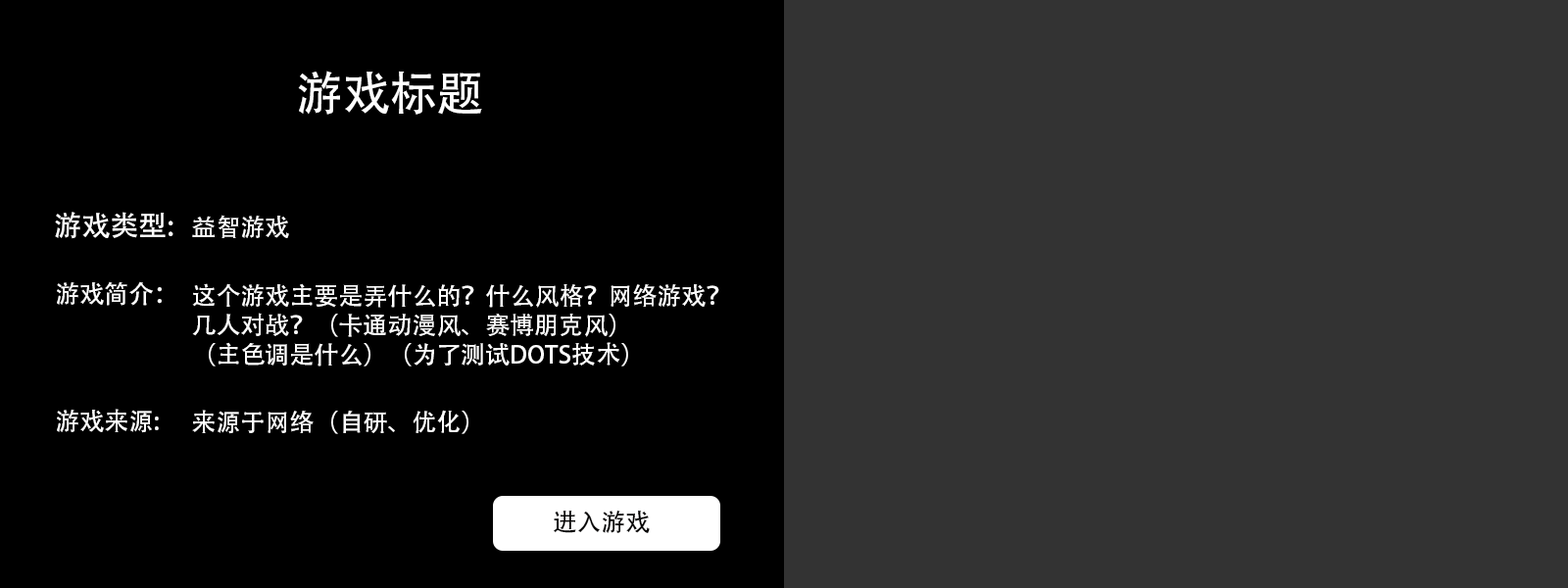
<style>
.page{position:relative;width:1568px;height:588px;background:#333333}
.page>*{position:absolute;margin:0}
.t1{font:47px "AdobeHeitiStd-Regular";color:#ffffff}
.t2{font:28.4px "AdobeHeitiStd-Regular";color:#ffffff}
.t3{font:24.5px "AdobeHeitiStd-Regular";color:#ffffff}
.t4{font:24.5px "AdobeHeitiStd-Regular";color:#040303}
</style>
<div class="page">
<p class="t1" style="left:298px;top:71px;width:184px;height:44px">游戏标题</p>
<p class="t2" style="left:55px;top:212px;width:118px;height:27px">游戏类型:</p>
<p class="t3" style="left:192px;top:215px;width:97px;height:23px">益智游戏</p>
<p class="t3" style="left:57px;top:281px;width:105px;height:25px">游戏简介：</p>
<p class="t3" style="left:192px;top:283px;width:527px;height:84px">这个游戏主要是弄什么的？什么风格？网络游戏？<br>几人对战？（卡通动漫风、赛博朋克风）<br>（主色调是什么）（为了测试DOTS技术）</p>
<p class="t3" style="left:57px;top:409px;width:102px;height:24px">游戏来源:</p>
<p class="t3" style="left:192px;top:410px;width:276px;height:24px">来源于网络（自研、优化）</p>
<p class="t4" style="left:554px;top:511px;width:96px;height:22px">进入游戏</p>
</div>
